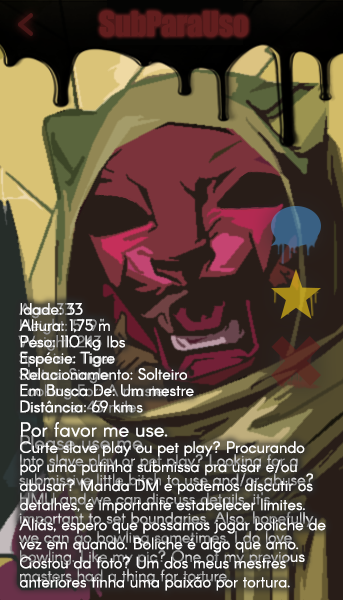
<style>
.page{position:relative;width:343px;height:600px}
.page>*{position:absolute;margin:0}
.t1{font:31px "Impact";letter-spacing:-0.015em;color:#621e1e}
.t2{font:16px "Arcon-Regular";color:#ffffff}
.t3{font:16px/22px "Arcon-Regular";color:#ffffff}
.t4{font:20px "Arcon-Regular";color:#ffffff}
.t5{font:16px/23px "Arcon-Regular";color:#ffffff}
</style>
<div class="page">
<p class="t1" style="left:99px;top:10px;width:149px;height:27px">SubParaUso</p>
<p class="t2" style="left:19px;top:303px;width:175px;height:110px">Idade: 33<br>Altura: 1,75 m<br>Peso: 110 kg<br>Espécie: Tigre<br>Relacionamento: Solteiro<br>Em Busca De: Um mestre<br>Distância: 69 km</p>
<p class="t3" style="left:19px;top:422px;width:307px;height:169px"><span class="t4">Por favor me use.<br></span><span class="t2">Curte slave play ou pet play? Procurando<br></span>por uma putinha submissa pra usar e/ou<br>abusar? Manda DM e podemos discutir os<br>detalhes, é importante estabelecer limites.<br><span class="t5">Aliás, espero que possamos jogar boliche de<br></span>vez em quando. Boliche é algo que amo.<br>Gostou da foto? Um dos meus mestres<br>anteriores tinha uma paixão por tortura.</p>
</div>
